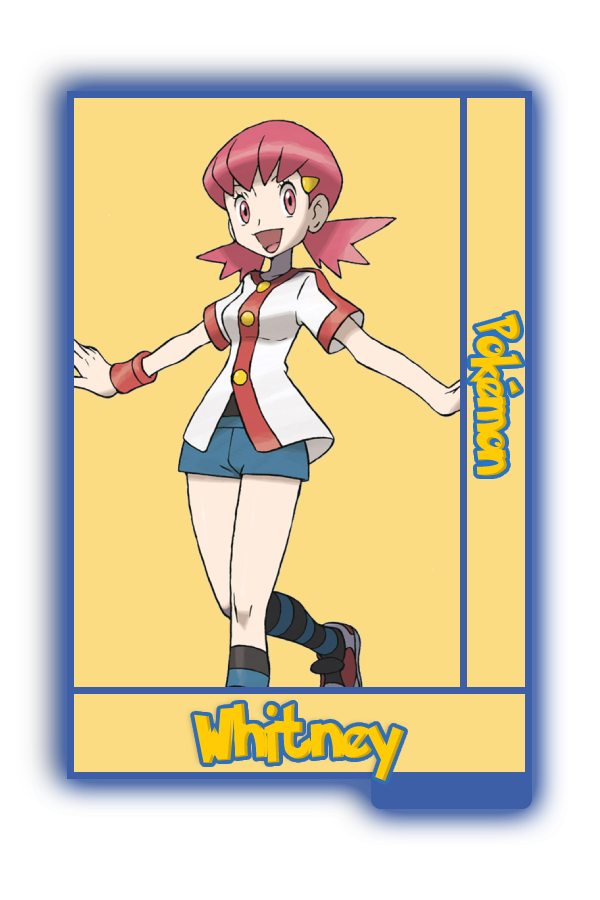
<style>
.page{position:relative;width:600px;height:900px;background:#fbdc83}
.page>*{position:absolute;margin:0}
.t1{font:48.8px "PokemonSolidNormal";color:#ffcb05;scale:0.8 1}
.t2{font:56.6px "PokemonSolidNormal";color:#ffcb05;scale:0.92 1}
</style>
<div class="page">
<p class="t1" style="left:469px;top:313px;width:54px;height:163px;rotate:90deg">Pokémon</p>
<p class="t2" style="left:194px;top:703px;width:211px;height:78px">Whitney</p>
</div>
